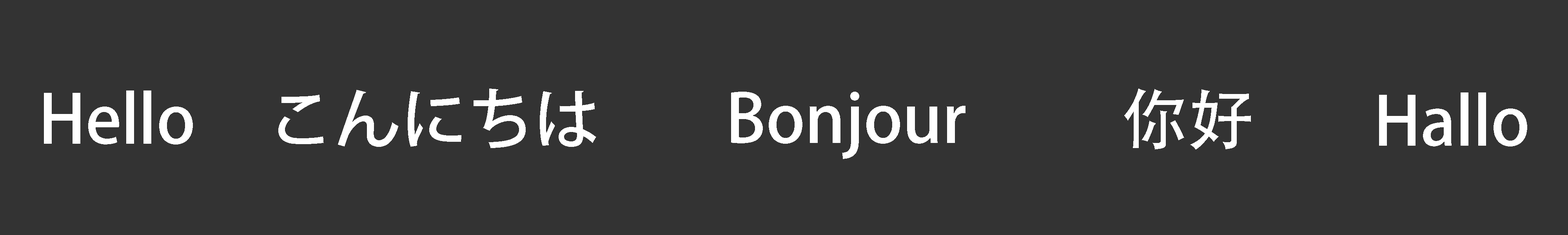
<style>
.page{position:relative;width:1568px;height:235px;background:#333333}
.page>*{position:absolute;margin:0}
.t1{font:66.4px "AdobeHeitiStd-Regular";color:#ffffff}
</style>
<div class="page">
<p class="t1" style="left:278px;top:89px;width:318px;height:59px">こんにちは</p>
<p class="t1" style="left:1124px;top:89px;width:127px;height:61px">你好</p>
<p class="t1" style="left:44px;top:91px;width:149px;height:54px">Hello</p>
<p class="t1" style="left:731px;top:92px;width:234px;height:67px">Bonjour</p>
<p class="t1" style="left:1379px;top:93px;width:148px;height:54px">Hallo</p>
</div>
